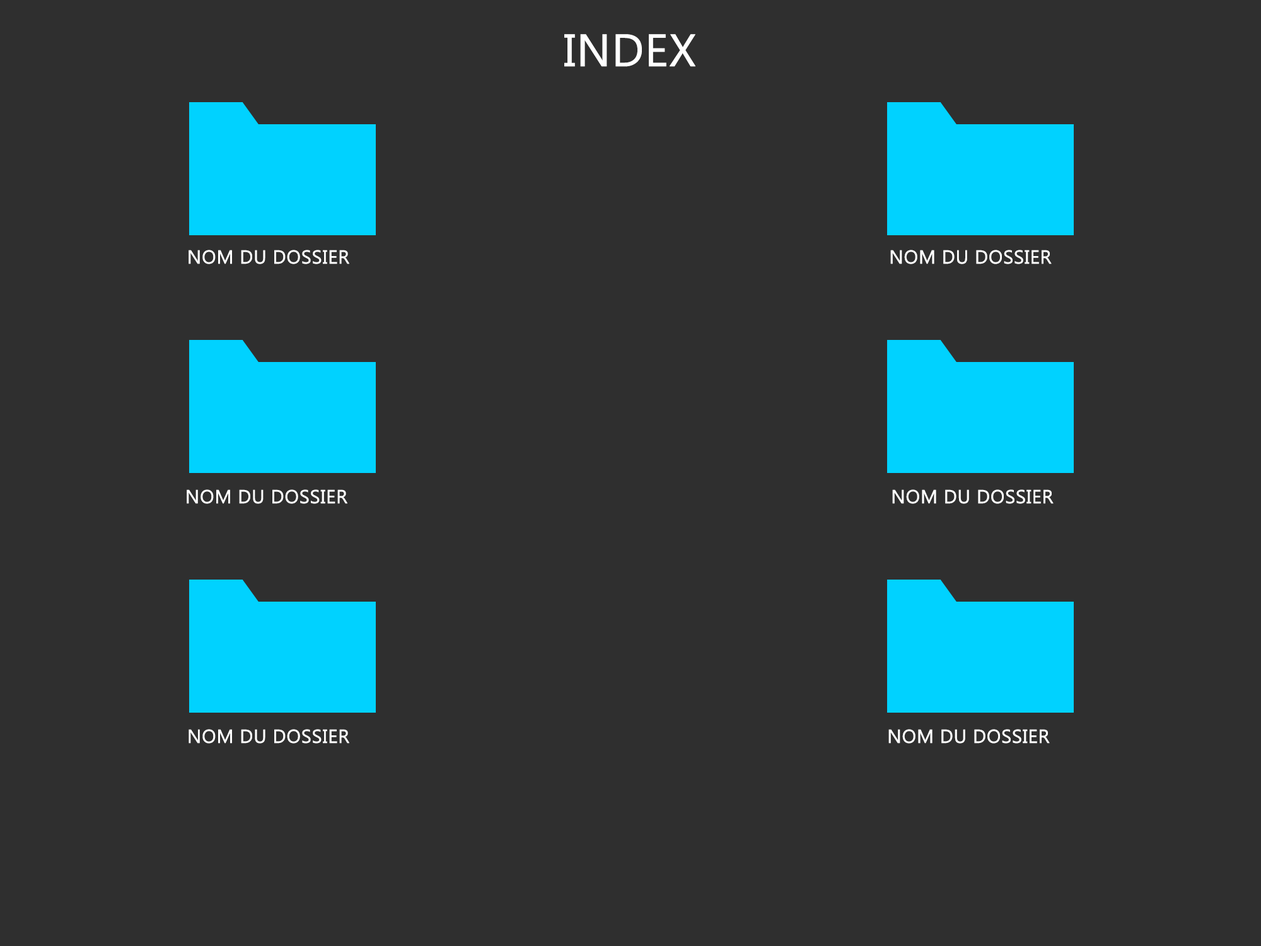
<style>
.page{position:relative;width:1261px;height:946px;background:#2f2f2f}
.page>*{position:absolute;margin:0}
.t1{font:45.4px "MicrosoftTaiLe";color:#ffffff;text-transform:uppercase;font-weight:bold}
.t2{font:18.9px "MicrosoftTaiLe";color:#ffffff;text-transform:uppercase;font-weight:bold}
</style>
<div class="page">
<p class="t1" style="left:564px;top:34px;width:131px;height:33px">index</p>
<p class="t2" style="left:189px;top:250px;width:160px;height:14px">Nom du dossier</p>
<p class="t2" style="left:890px;top:250px;width:162px;height:14px">Nom du dossier</p>
<p class="t2" style="left:187px;top:489px;width:160px;height:15px">Nom du dossier</p>
<p class="t2" style="left:892px;top:489px;width:161px;height:15px">Nom du dossier</p>
<p class="t2" style="left:189px;top:729px;width:160px;height:14px">Nom du dossier</p>
<p class="t2" style="left:888px;top:729px;width:162px;height:14px">Nom du dossier</p>
</div>
